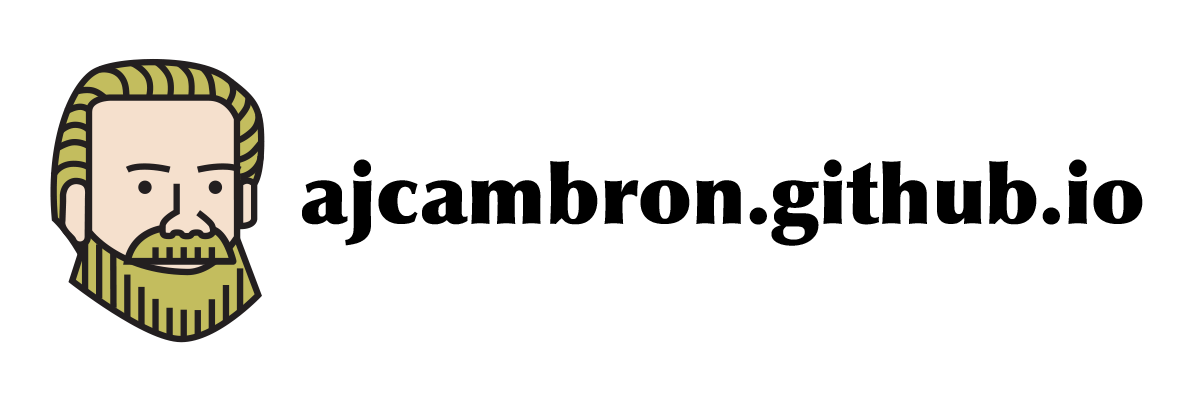
<style>
.page{position:relative;width:1200px;height:400px;background:#ffffff}
.page>*{position:absolute;margin:0}
.t1{font:83px "Optima-ExtraBlack";color:#000000}
</style>
<div class="page">
<p class="t1" style="left:302px;top:159px;width:841px;height:87px">ajcambron.github.io</p>
</div>
